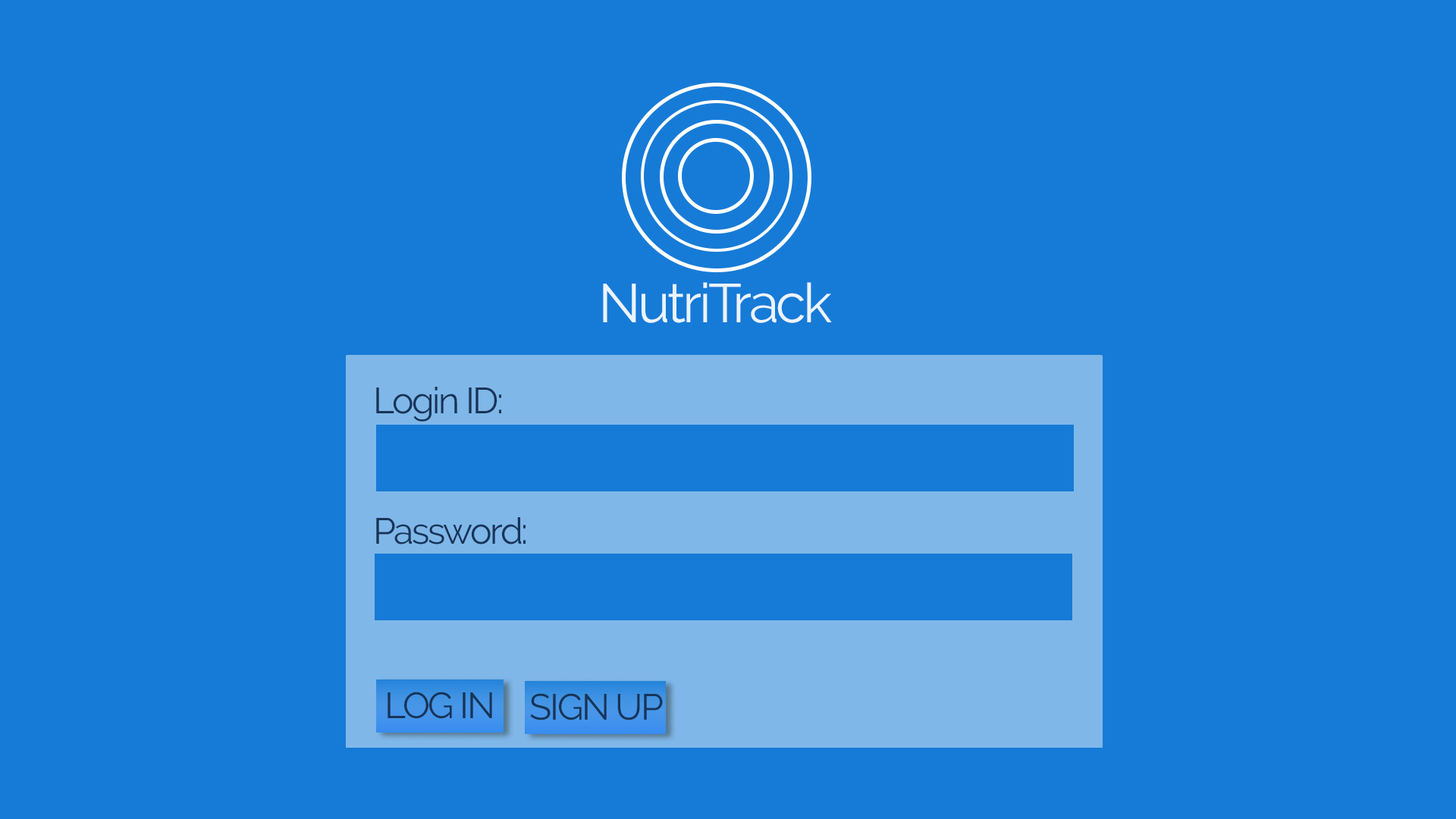
<style>
.page{position:relative;width:1456px;height:819px;background:#167bd7}
.page>*{position:absolute;margin:0}
.t1{font:54.6px "Raleway-Regular";letter-spacing:-0.05em;color:#ebf4ff}
.t2{font:36.4px "Raleway-Regular";letter-spacing:-0.05em;color:#173457}
</style>
<div class="page">
<p class="t1" style="left:603px;top:282px;width:229px;height:41px">NutriTrack</p>
<p class="t2" style="left:376px;top:387px;width:125px;height:35px">Login ID:</p>
<p class="t2" style="left:376px;top:517px;width:150px;height:27px">Password:</p>
<p class="t2" style="left:388px;top:692px;width:104px;height:27px">LOG IN</p>
<p class="t2" style="left:530px;top:693px;width:133px;height:27px">SIGN UP</p>
</div>
